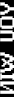
<style>
.page{position:relative;width:14px;height:97px;background:#000000}
.page>*{position:absolute;margin:0}
.t1{font:49.3px "Game-Over";color:#ffffff}
</style>
<div class="page">
<p class="t1" style="left:0px;top:2px;width:14px;height:92px;rotate:90deg">YOU  WIN</p>
</div>
